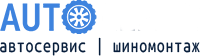
<style>
.page{position:relative;width:200px;height:56px;background:#ffffff}
.page>*{position:absolute;margin:0}
.t1{font:20px "UbuntuMono-Regular";letter-spacing:0.047em;color:#081e3b;scale:0.8 1}
</style>
<div class="page">
<p class="t1" style="left:0px;top:37px;width:200px;height:19px">автосервис | шиномонтаж</p>
</div>
